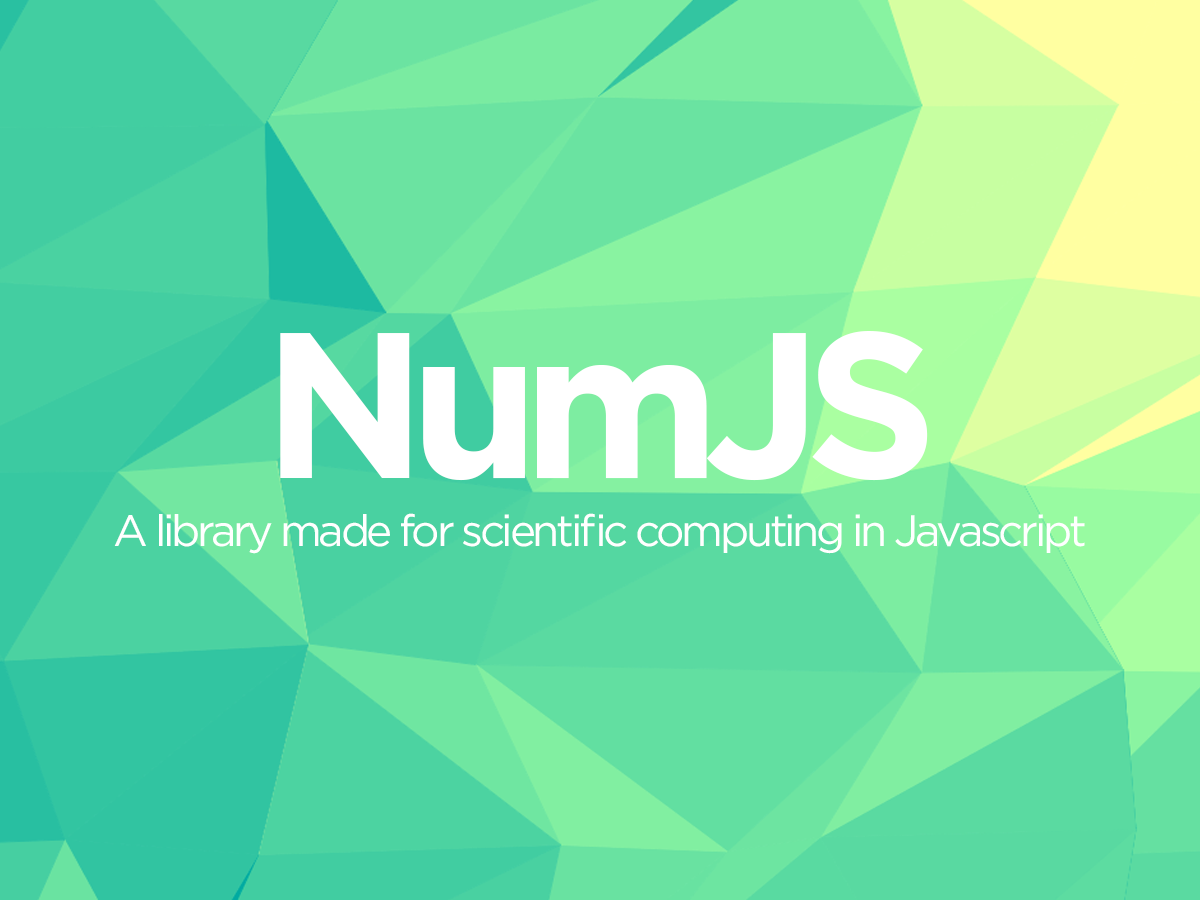
<style>
.page{position:relative;width:1200px;height:900px}
.page>*{position:absolute;margin:0}
.t1{font:206.5px "Gotham-Bold";letter-spacing:-0.075em;color:#ffffff}
.t2{font:44px "Gotham-Book";letter-spacing:-0.075em;color:#ffffff}
</style>
<div class="page">
<p class="t1" style="left:280px;top:331px;width:648px;height:150px">NumJS</p>
<p class="t2" style="left:114px;top:513px;width:971px;height:41px">A library made for scientific computing in Javascript</p>
</div>
